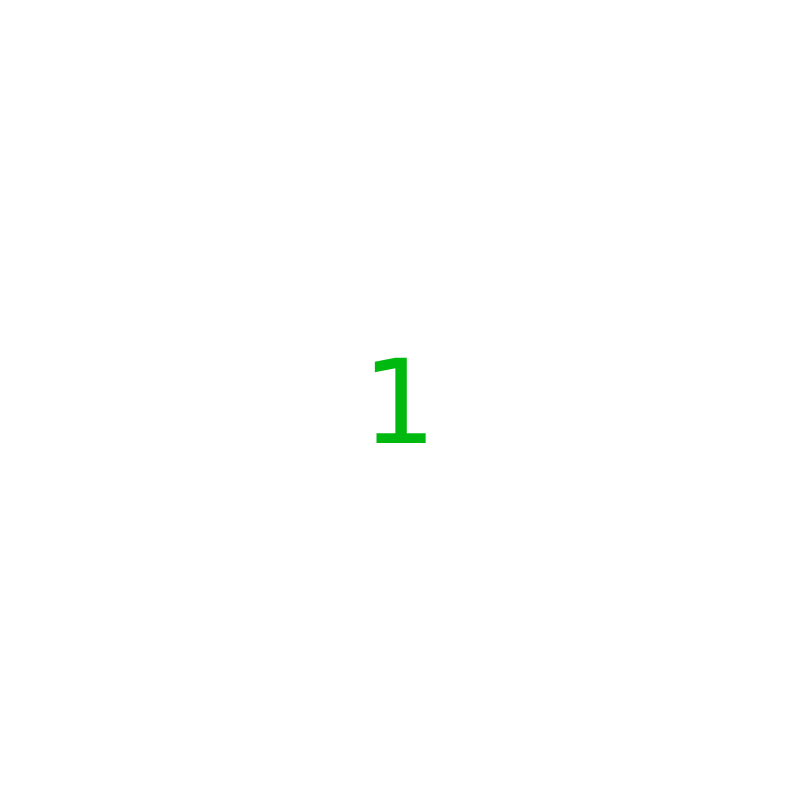
<style>
.page{position:relative;width:800px;height:800px;background:#ffffff}
.page>*{position:absolute;margin:0}
.t1{font:117px "DejaVuSans";color:#00b910}
</style>
<div class="page">
<p class="t1" style="left:374px;top:357px;width:52px;height:86px">1</p>
</div>
